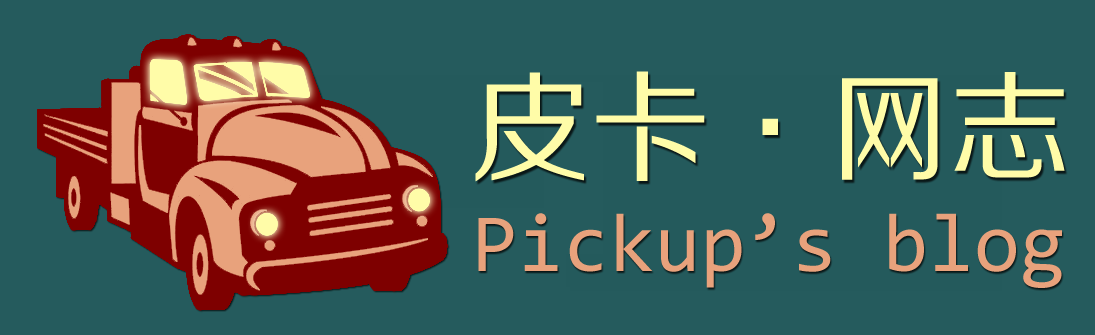
<style>
.page{position:relative;width:1095px;height:335px;background:#255b5d}
.page>*{position:absolute;margin:0}
.t1{font:120px "FZZHJW--GB1-0";color:#fffca8}
.t2{font:83px "Consolas";color:#e7a07b}
</style>
<div class="page">
<p class="t1" style="left:475px;top:71px;width:590px;height:111px">皮卡·网志</p>
<p class="t2" style="left:478px;top:213px;width:584px;height:75px">Pickup’s blog</p>
</div>
